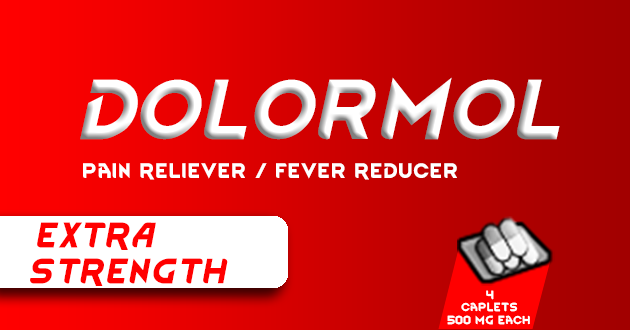
<style>
.page{position:relative;width:630px;height:330px}
.page>*{position:absolute;margin:0}
.t1{font:73.8px "RimWordFont";color:#ffffff}
.t2{font:18px "RimWordFont";color:#ffffff}
.t3{font:30.5px "RimWordFont";color:#ff0000}
.t4{font:10px "RimWordFont";color:#ffffff}
</style>
<div class="page">
<p class="t1" style="left:80px;top:77px;width:480px;height:63px">Dolormol</p>
<p class="t2" style="left:83px;top:163px;width:374px;height:17px">Pain Reliever / Fever Reducer</p>
<p class="t3" style="left:30px;top:222px;width:198px;height:64px">EXTRA<br>STRENGTH</p>
<p class="t4" style="left:461px;top:290px;width:57px;height:22px;text-align:center">4<br>caplets</p>
<p class="t4" style="left:447px;top:315px;width:83px;height:10px">500 mg each</p>
</div>
